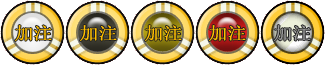
<style>
.page{position:relative;width:325px;height:65px;background:#ffffff}
.page>*{position:absolute;margin:0}
.t1{font:17.2px "SimSun";color:#ffbf00;font-weight:bold;scale:1.09 1}
</style>
<div class="page">
<p class="t1" style="left:15px;top:25px;width:37px;height:16px">加注</p>
<p class="t1" style="left:80px;top:25px;width:37px;height:16px">加注</p>
<p class="t1" style="left:145px;top:25px;width:37px;height:16px">加注</p>
<p class="t1" style="left:209px;top:25px;width:37px;height:16px">加注</p>
</div>
